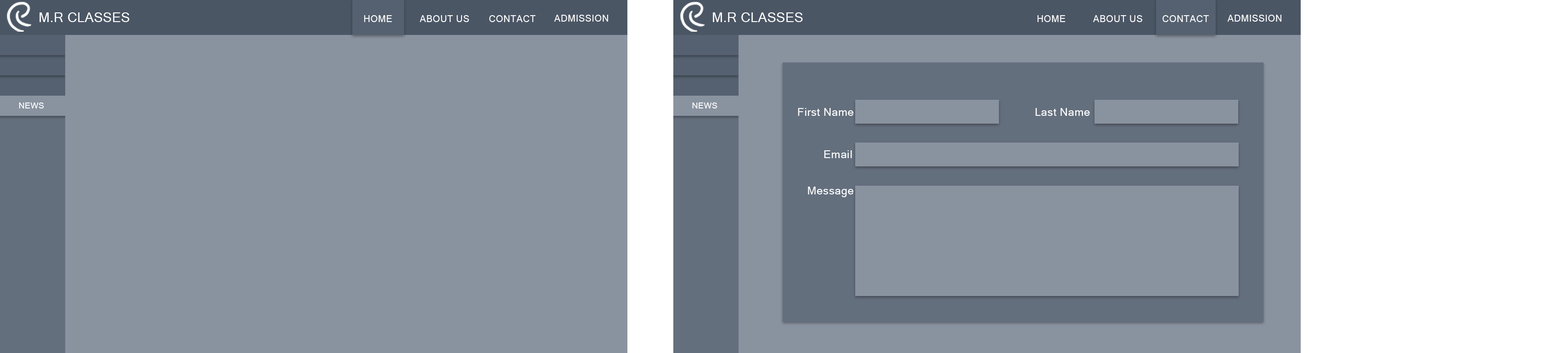
<style>
.page{position:relative;width:1568px;height:353px;background:#89929f}
.page>*{position:absolute;margin:0}
.t1{font:13.1px "MicrosoftSansSerif";letter-spacing:0.025em;color:#ffffff}
.t2{font:9.4px "MicrosoftSansSerif";letter-spacing:0.025em;color:#ffffff}
.t3{font:8.3px "MicrosoftSansSerif";letter-spacing:0.025em;color:#ffffff}
.t4{font:11px "MicrosoftSansSerif";letter-spacing:0.025em;color:#ffffff}
</style>
<div class="page">
<p class="t1" style="left:39px;top:12px;width:91px;height:10px">M.R CLASSES</p>
<p class="t2" style="left:364px;top:15px;width:28px;height:7px">HOME</p>
<p class="t2" style="left:420px;top:15px;width:49px;height:7px">ABOUT US</p>
<p class="t2" style="left:489px;top:15px;width:47px;height:7px">CONTACT</p>
<p class="t2" style="left:554px;top:15px;width:54px;height:7px">ADMISSION</p>
<p class="t1" style="left:713px;top:12px;width:90px;height:10px">M.R CLASSES</p>
<p class="t2" style="left:1038px;top:15px;width:28px;height:7px">HOME</p>
<p class="t2" style="left:1093px;top:15px;width:49px;height:7px">ABOUT US</p>
<p class="t2" style="left:1162px;top:15px;width:47px;height:7px">CONTACT</p>
<p class="t2" style="left:1227px;top:15px;width:54px;height:7px">ADMISSION</p>
<p class="t3" style="left:19px;top:102px;width:25px;height:6px">NEWS</p>
<p class="t3" style="left:692px;top:102px;width:25px;height:6px">NEWS</p>
<p class="t4" style="left:798px;top:108px;width:55px;height:8px">First Name</p>
<p class="t4" style="left:1035px;top:108px;width:55px;height:8px">Last Name</p>
<p class="t4" style="left:824px;top:150px;width:28px;height:8px">Email</p>
<p class="t4" style="left:808px;top:186px;width:45px;height:11px">Message</p>
</div>
